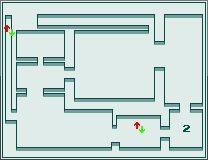
<style>
.page{position:relative;width:208px;height:160px;background:#dfecea}
.page>*{position:absolute;margin:0}
.t1{font:8px "PressStart2P-Regular";color:#054e47}
</style>
<div class="page">
<p class="t1" style="left:183px;top:125px;width:7px;height:7px">2</p>
</div>
